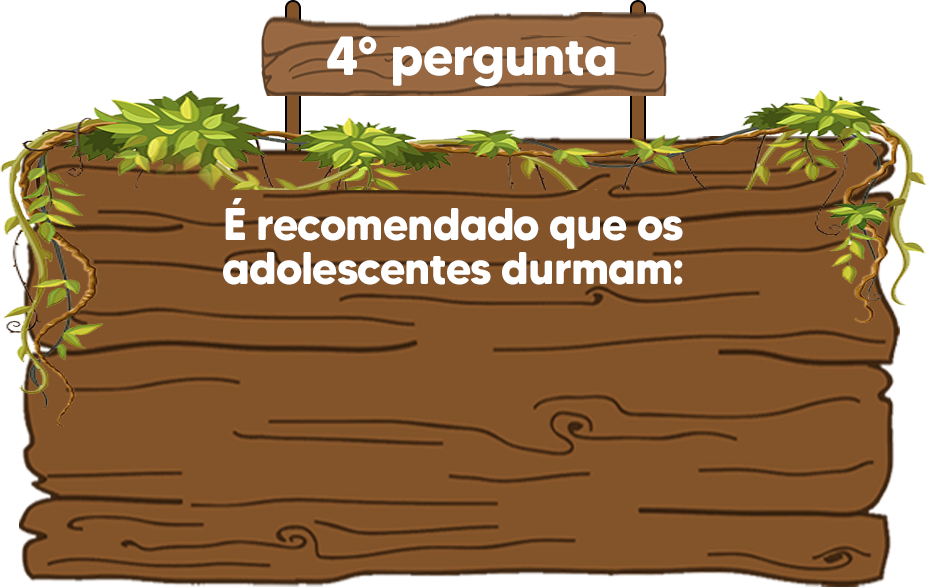
<style>
.page{position:relative;width:927px;height:587px;background:#835329}
.page>*{position:absolute;margin:0}
.t1{font:55.1px "MADETommySoft-Bold";letter-spacing:-0.02em;color:#ffffff;scale:0.96 1}
.t2{font:45.7px/44.1px "MADETommySoft-Bold";letter-spacing:-0.02em;color:#ffffff;scale:0.97 1}
</style>
<div class="page">
<p class="t1" style="left:327px;top:36px;width:288px;height:51px">4° pergunta</p>
<p class="t2" style="left:223px;top:198px;width:460px;height:87px;text-align:center">É recomendado que os <br>adolescentes durmam:</p>
</div>
